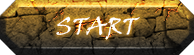
<style>
.page{position:relative;width:194px;height:55px}
.page>*{position:absolute;margin:0}
.t1{font:24px "VinerHandITC";color:#fefefe}
</style>
<div class="page">
<p class="t1" style="left:56px;top:16px;width:84px;height:24px">START</p>
</div>
